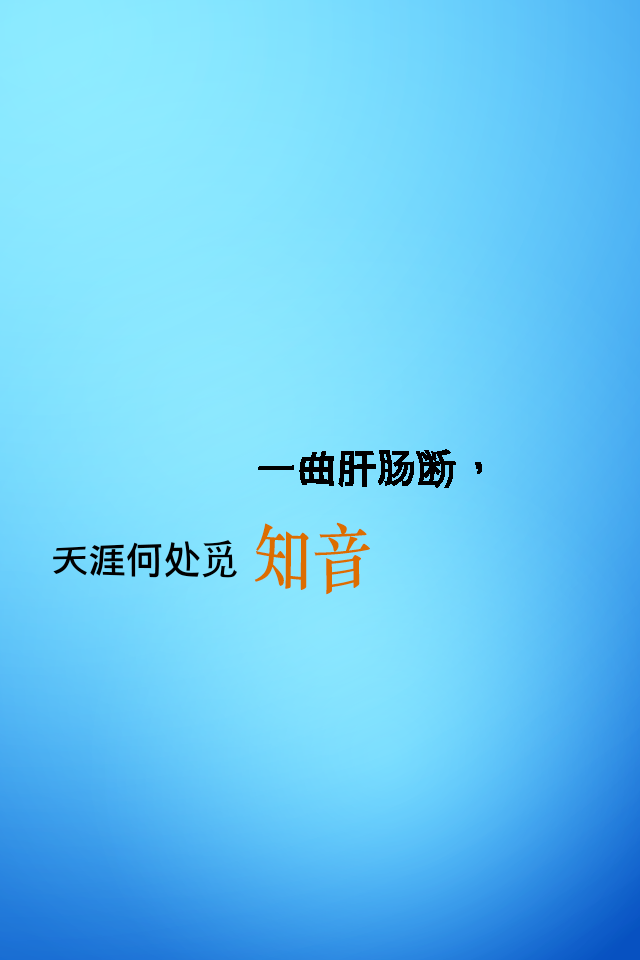
<style>
.page{position:relative;width:640px;height:960px}
.page>*{position:absolute;margin:0}
.t1{font:36px "LiHeiPro";color:#000000}
.t2{font:36px "AdobeHeitiStd-Regular";color:#000000}
.t3{font:60px "STSongti-SC-Bold";color:#dc6d00}
</style>
<div class="page">
<p class="t1" style="left:258px;top:449px;width:224px;height:39px">一曲肝<span class="t2">肠</span>断，</p>
<p class="t3" style="left:254px;top:522px;width:116px;height:73px">知音</p>
<p class="t1" style="left:53px;top:540px;width:184px;height:38px">天涯何处<span class="t2">觅</span></p>
</div>
